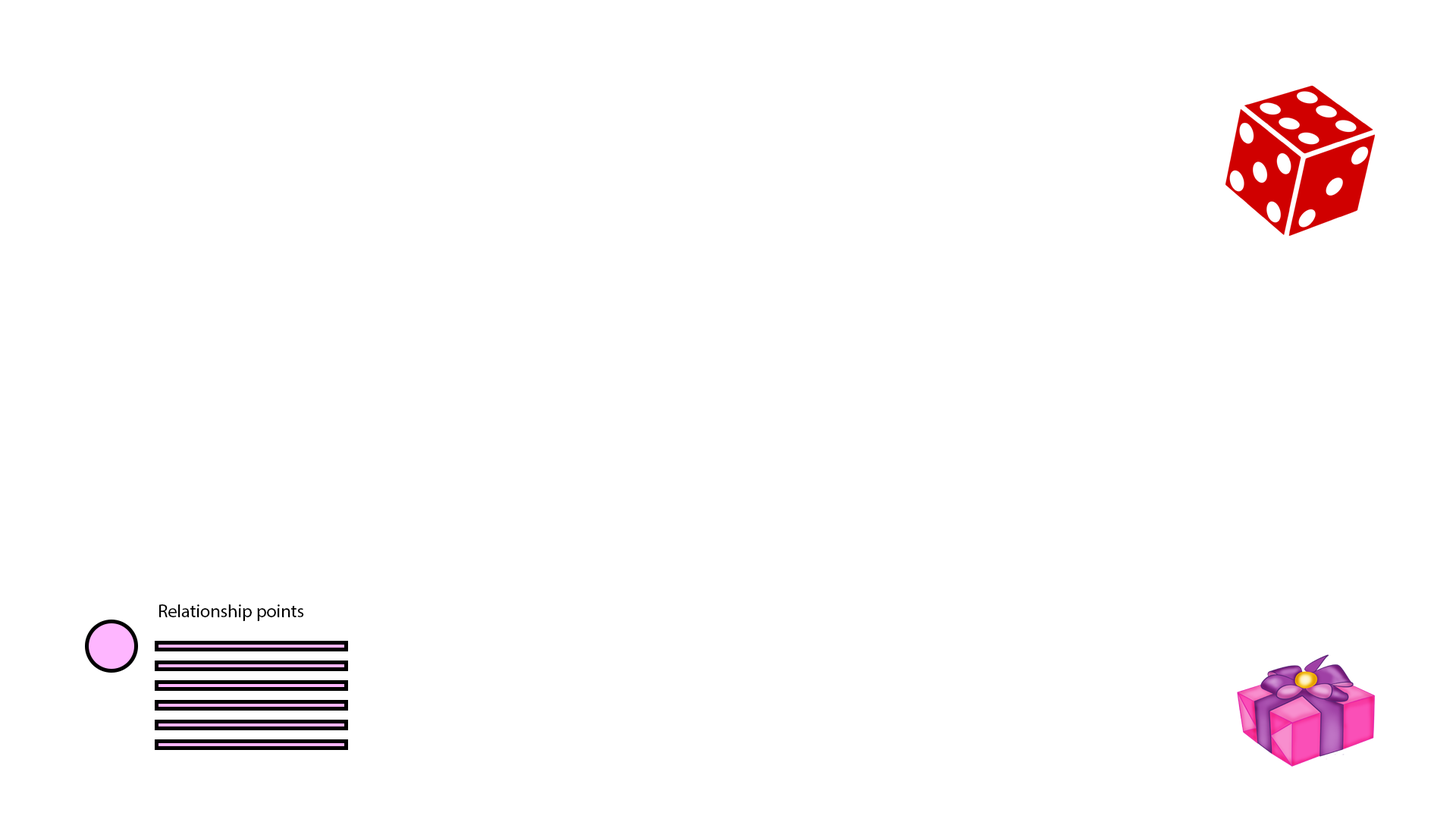
<style>
.page{position:relative;width:1456px;height:819px;background:#ffffff}
.page>*{position:absolute;margin:0}
.t1{font:18.2px "MyriadPro-Regular";color:#000000}
</style>
<div class="page">
<p class="t1" style="left:159px;top:604px;width:145px;height:17px">Relationship points</p>
</div>
